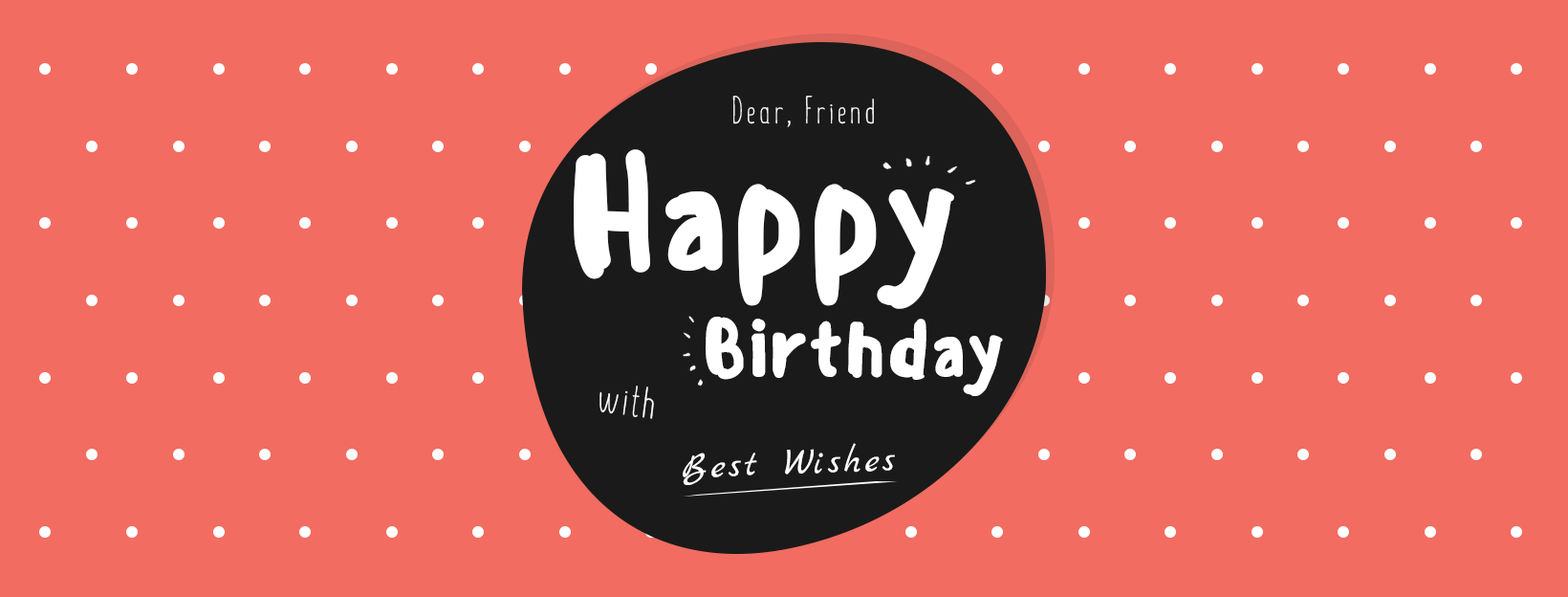
<style>
.page{position:relative;width:1568px;height:597px;background:#f26c61}
.page>*{position:absolute;margin:0}
.t1{font:38.2px "SummerFont-Light";letter-spacing:0.1em;color:#ffffff}
.t2{font:154.9px "Sensei-Medium";color:#ffffff}
.t3{font:78.4px "Sensei-Medium";color:#ffffff}
.t4{font:47.8px "SummerFont-Light";letter-spacing:0.06em;color:#ffffff}
.t5{font:38.2px "MarckScript-Regular";letter-spacing:0.1em;color:#ffffff}
</style>
<div class="page">
<p class="t1" style="left:732px;top:96px;width:142px;height:31px">Dear, Friend</p>
<p class="t2" style="left:574px;top:149px;width:380px;height:160px">Happy</p>
<p class="t3" style="left:706px;top:316px;width:297px;height:80px">Birthday</p>
<p class="t4" style="left:599px;top:385px;width:55px;height:34px;rotate:8deg">with</p>
<p class="t5" style="left:683px;top:443px;width:212px;height:42px;rotate:-2deg">Best Wishes</p>
</div>
